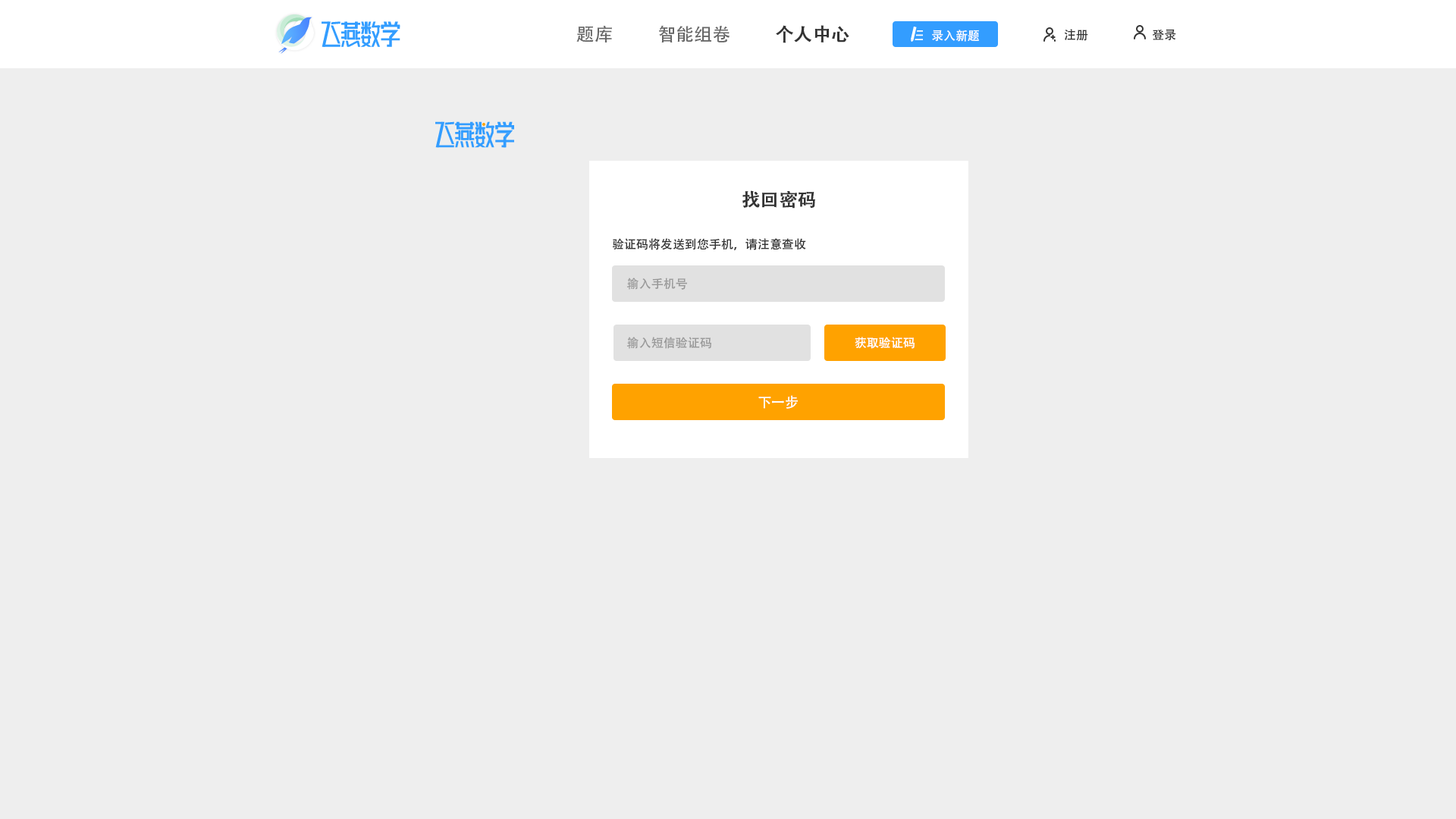
<style>
.page{position:relative;width:1456px;height:819px;background:#eeeeee}
.page>*{position:absolute;margin:0}
.t1{font:18.2px "AdobeHeitiStd-Regular";color:#666666}
.t2{font:18.2px "AdobeHeitiStd-Regular";color:#333333;font-weight:bold}
.t3{font:12.1px "AdobeHeitiStd-Regular";color:#ffffff}
.t4{font:12.1px "AdobeHeitiStd-Regular";color:#333333}
.t5{font:12.1px "AdobeHeitiStd-Regular";color:#999999}
.t6{font:13.6px "AdobeHeitiStd-Regular";color:#ffffff}
</style>
<div class="page">
<p class="t1" style="left:576px;top:26px;width:36px;height:16px">题库</p>
<p class="t1" style="left:659px;top:25px;width:71px;height:17px">智能组卷</p>
<p class="t2" style="left:776px;top:25px;width:73px;height:18px">个人中心</p>
<p class="t3" style="left:932px;top:30px;width:47px;height:12px">录入新题</p>
<p class="t4" style="left:1064px;top:29px;width:24px;height:12px">注册</p>
<p class="t4" style="left:1152px;top:29px;width:24px;height:12px">登录</p>
<p class="t2" style="left:742px;top:190px;width:73px;height:19px">找回密码</p>
<p class="t4" style="left:613px;top:238px;width:193px;height:12px">验证码将发送到您手机，请注意查收</p>
<p class="t5" style="left:626px;top:278px;width:61px;height:12px">输入手机号</p>
<p class="t5" style="left:626px;top:337px;width:85px;height:12px">输入短信验证码</p>
<p class="t3" style="left:855px;top:337px;width:60px;height:12px">获取验证码</p>
<p class="t6" style="left:758px;top:395px;width:40px;height:14px">下一步</p>
</div>
